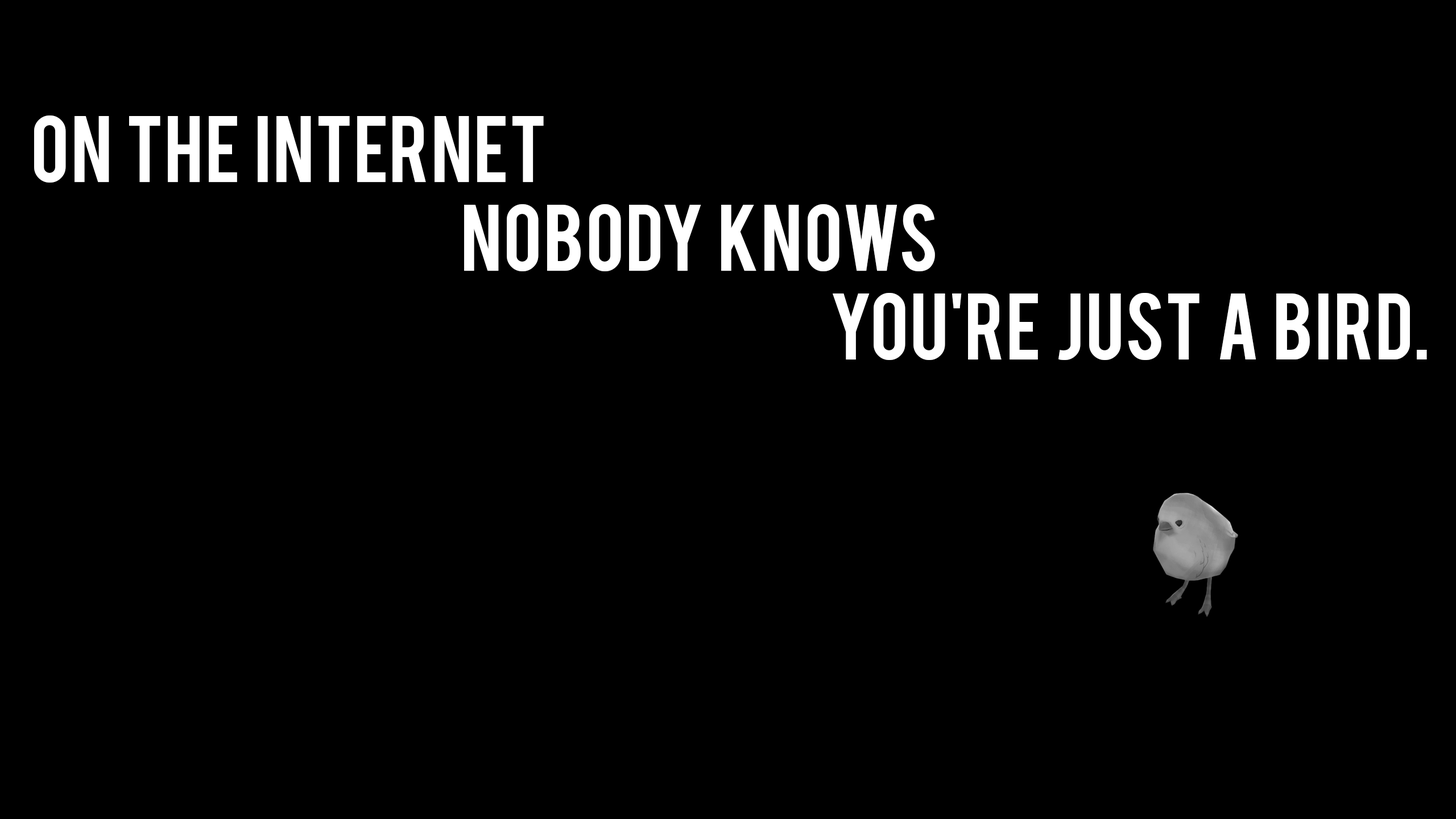
<style>
.page{position:relative;width:1456px;height:819px;background:#000000}
.page>*{position:absolute;margin:0}
.t1{font:73.9px "Bebas";color:#ffffff}
</style>
<div class="page">
<p class="t1" style="left:34px;top:115px;width:1393px;height:245px">On  the  internet<br>                                                               nobody  knows <br>                                       you're  just  a  bird.</p>
</div>
